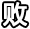
<style>
.page{position:relative;width:30px;height:29px;background:#fefefe}
.page>*{position:absolute;margin:0}
.t1{font:24px "MicrosoftYaHei";letter-spacing:0.02em;color:#fefefe;font-weight:bold}
</style>
<div class="page">
<p class="t1" style="left:3px;top:2px;width:25px;height:25px">败</p>
</div>
